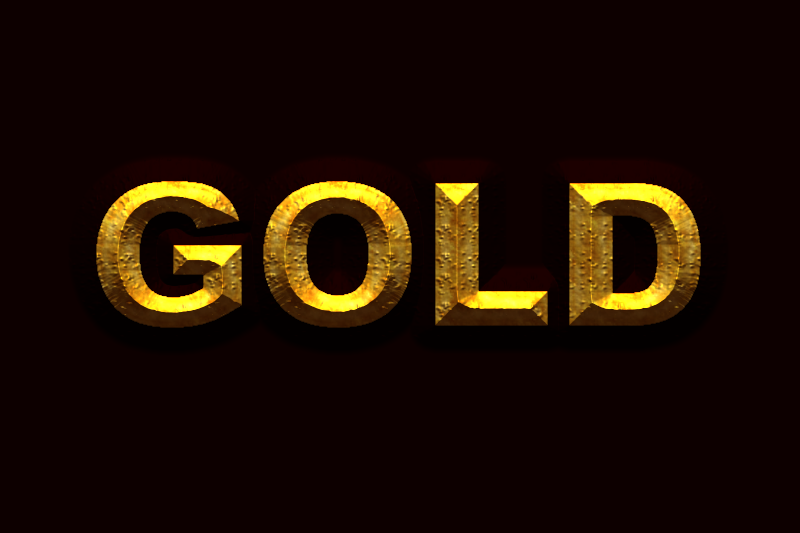
<style>
.page{position:relative;width:800px;height:533px;background:#0d0000}
.page>*{position:absolute;margin:0}
.t1{font:200px "Arial-Black"}
</style>
<div class="page">
<p class="t1" style="left:96px;top:181px;width:605px;height:147px">GOLD</p>
</div>
